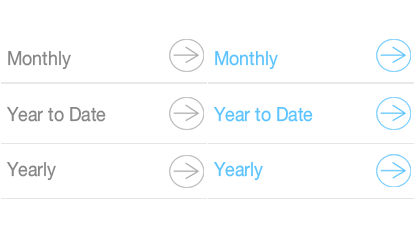
<style>
.page{position:relative;width:420px;height:250px;background:#ffffff}
.page>*{position:absolute;margin:0}
.t1{font:19.4px/55.5px "HelveticaNeue";color:#878787;scale:0.91 1}
.t2{font:19.4px/55.5px "HelveticaNeue";color:#5dc4ff;scale:0.91 1}
</style>
<div class="page">
<p class="t1" style="left:7px;top:51px;width:99px;height:130px">Monthly<br>Year to Date<br>Yearly</p>
<p class="t2" style="left:214px;top:51px;width:99px;height:130px">Monthly<br>Year to Date<br>Yearly</p>
</div>
